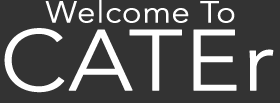
<style>
.page{position:relative;width:280px;height:103px;background:#333333}
.page>*{position:absolute;margin:0}
.t1{font:30px "Avenir-Light";color:#ffffff;font-weight:bold;scale:1.1 1}
.t2{font:85px "Avenir-Light";color:#ffffff;font-weight:bold;scale:1.1 1}
</style>
<div class="page">
<p class="t1" style="left:45px;top:0px;width:190px;height:23px">Welcome To</p>
<p class="t2" style="left:4px;top:28px;width:270px;height:65px">CATEr</p>
</div>
